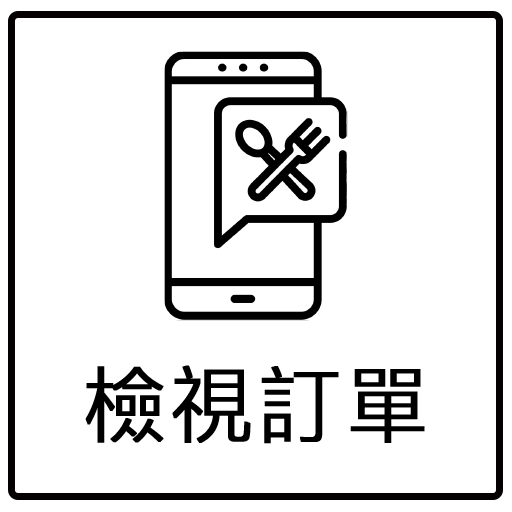
<style>
.page{position:relative;width:512px;height:512px;background:#ffffff}
.page>*{position:absolute;margin:0}
.t1{font:83.3px "PingFangTC-Light";letter-spacing:0.026em;color:#000000;font-weight:bold}
</style>
<div class="page">
<p class="t1" style="left:85px;top:365px;width:340px;height:79px">檢視訂單</p>
</div>
